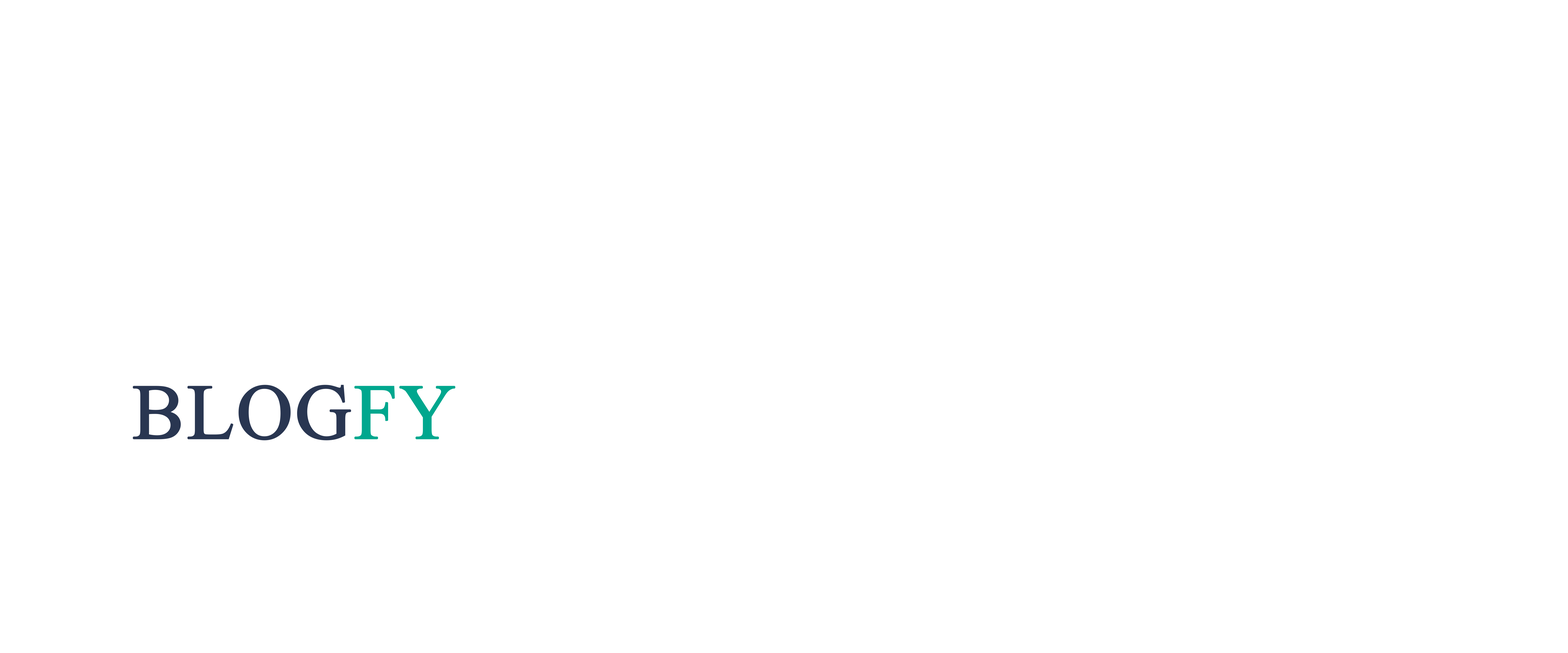
<style>
.page{position:relative;width:1568px;height:653px;background:#ffffff}
.page>*{position:absolute;margin:0}
.t1{font:78.4px "TimesNewRomanPSMT";color:#293651;font-weight:bold}
.t2{font:78.4px "TimesNewRomanPSMT";color:#00a78e;font-weight:bold}
</style>
<div class="page">
<p class="t1" style="left:133px;top:385px;width:323px;height:56px">BLOG<span class="t2">FY</span></p>
</div>
